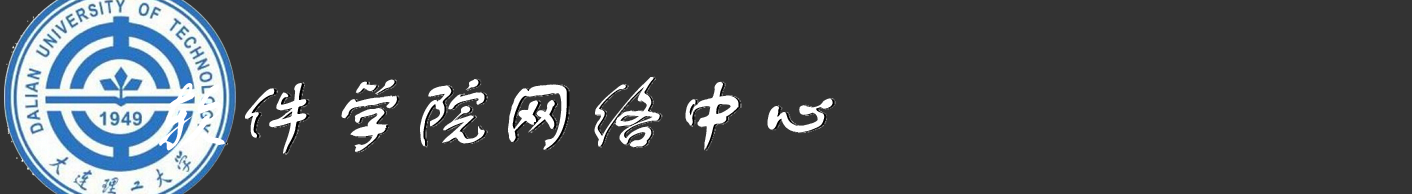
<style>
.page{position:relative;width:1412px;height:194px;background:#333333}
.page>*{position:absolute;margin:0}
.t1{font:86.3px "FZSTK--GBK1-0";color:#ffffff;font-style:italic}
</style>
<div class="page">
<p class="t1" style="left:159px;top:77px;width:674px;height:77px">软件学院网络中心</p>
</div>
